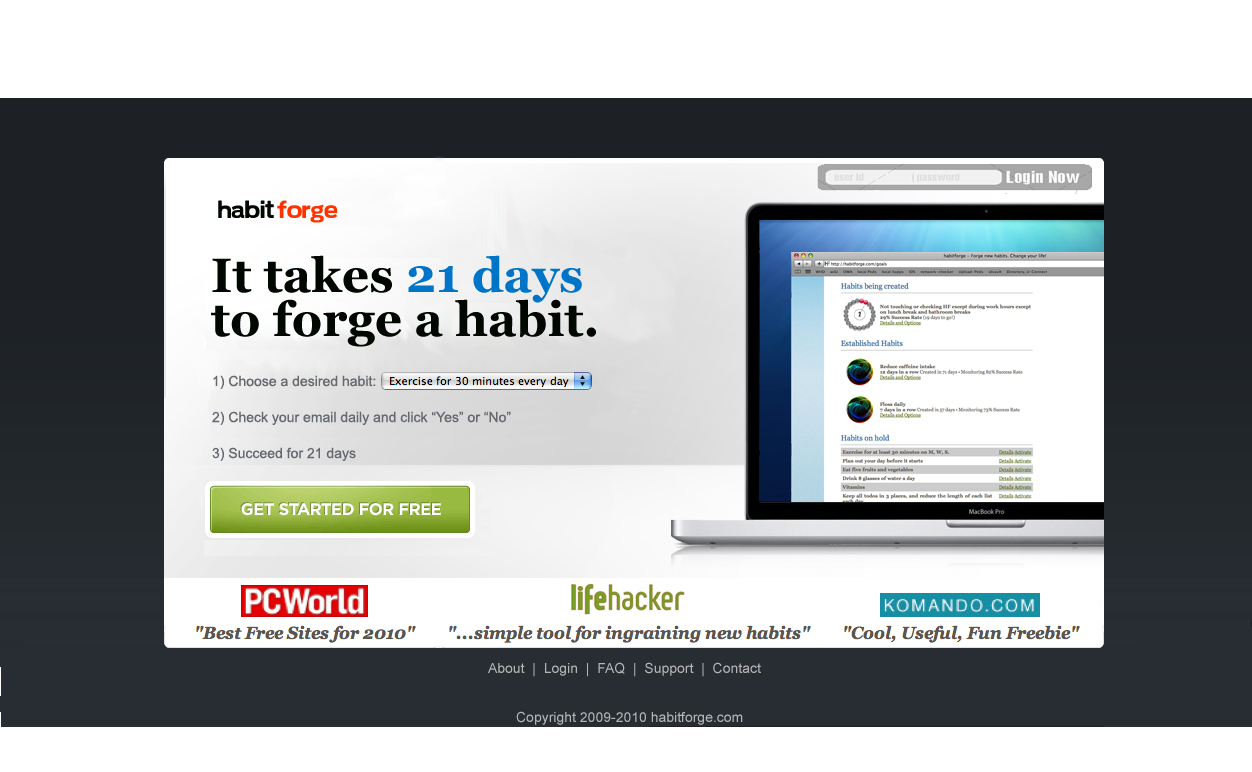
<style>
.page{position:relative;width:1252px;height:772px;background:#ffffff}
.page>*{position:absolute;margin:0}
.t1{font:18px "Soolidium";color:#000700}
.t2{font:18px "Soolidium";color:#ff3300}
.t3{font:48px/44px "Georgia-Bold";color:#000700}
.t4{font:48px/44px "Georgia-Bold";color:#0074c6}
.t5{font:14px/18px "ArialMT";color:#65696f}
.t6{font:14px "ArialMT";color:#b5b5b5}
</style>
<div class="page">
<p class="t1" style="left:218px;top:200px;width:56px;height:18px">habit</p>
<p class="t2" style="left:277px;top:200px;width:61px;height:23px">forge</p>
<p class="t3" style="left:211px;top:255px;width:385px;height:92px">It takes <span class="t4">21 days<br></span>to forge a habit.</p>
<p class="t5" style="left:212px;top:375px;width:299px;height:86px">1) Choose a desired habit:<br><br>2) Check your email daily and click “Yes” or “No”<br><br>3) Succeed for 21 days</p>
<p class="t6" style="left:488px;top:662px;width:273px;height:15px">About  |  Login  |  FAQ  |  Support  |  Contact</p>
<p class="t6" style="left:516px;top:711px;width:227px;height:14px">Copyright 2009-2010 habitforge.com</p>
</div>
